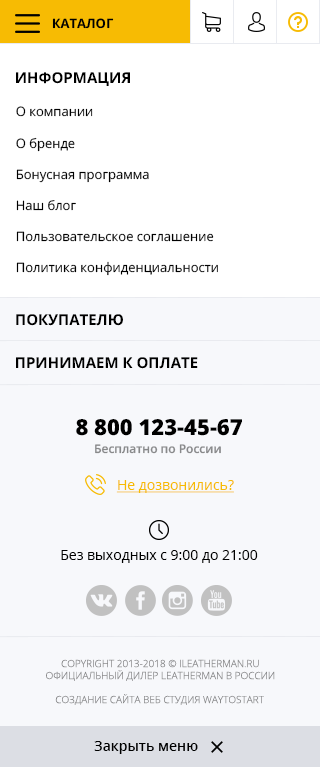
<style>
.page{position:relative;width:320px;height:767px;background:#f7f8fb}
.page>*{position:absolute;margin:0}
.t1{font:13px "OpenSans-Bold";color:#000000;text-transform:uppercase}
.t2{font:15px "OpenSans-Bold";color:#000000;text-transform:uppercase}
.t3{font:13px "OpenSans";color:#000000}
.t4{font:22px "OpenSans-Extrabold";color:#000000}
.t5{font:12px "OpenSans-Semibold";color:#88898a}
.t6{font:14px "OpenSans";color:#f7bb03;text-decoration:underline}
.t7{font:14px "OpenSans";color:#000000}
.t8{font:10px "OpenSans-Light";color:#88898a;text-transform:uppercase}
.t9{font:10px "OpenSans-Light";color:#88898a}
.t10{font:14px "OpenSans-Semibold";color:#000000}
</style>
<div class="page">
<p class="t1" style="left:52px;top:18px;width:62px;height:11px">Каталог</p>
<p class="t2" style="left:16px;top:72px;width:114px;height:14px">Информация</p>
<p class="t3" style="left:16px;top:106px;width:202px;height:170px">О компании<br><br>О бренде<br><br>Бонусная программа<br><br>Наш блог<br><br>Пользовательское соглашение<br><br>Политика конфиденциальности</p>
<p class="t2" style="left:16px;top:314px;width:107px;height:12px">Покупателю</p>
<p class="t2" style="left:16px;top:357px;width:182px;height:12px">Принимаем к оплате</p>
<p class="t4" style="left:76px;top:419px;width:166px;height:17px">8 800 123-45-67</p>
<p class="t5" style="left:95px;top:444px;width:126px;height:10px">Бесплатно по России</p>
<p class="t6" style="left:116px;top:480px;width:118px;height:13px">Не дозвонились?</p>
<p class="t7" style="left:61px;top:550px;width:197px;height:13px">Без выходных с 9:00 до 21:00</p>
<p class="t8" style="left:46px;top:659px;width:229px;height:22px;text-align:center">Copyright 2013-2018 © iLeatherman.ru<br>официальный дилер LEATHERMAN в России</p>
<p class="t9" style="left:55px;top:694px;width:209px;height:11px">СОЗДАНИЕ САЙТА ВЕБ СТУДИЯ WAYTOSTART</p>
<p class="t10" style="left:94px;top:741px;width:104px;height:13px">Закрыть меню</p>
</div>
